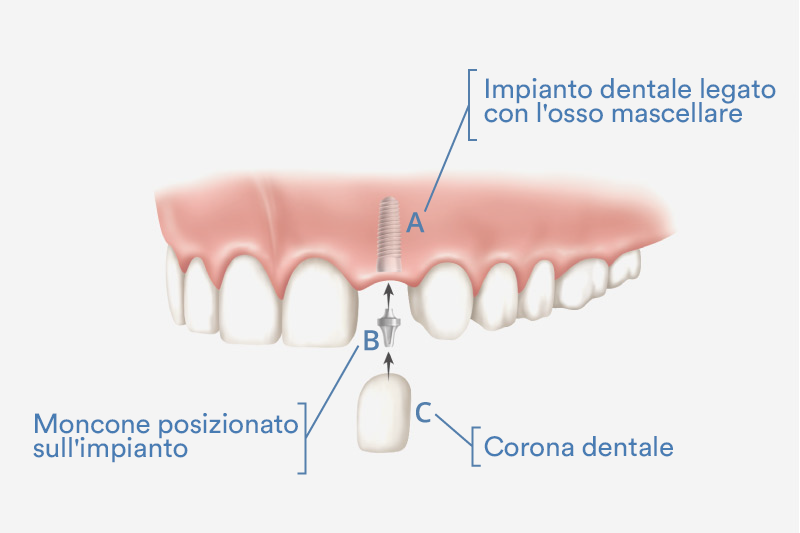
<style>
.page{position:relative;width:800px;height:533px;background:#f4f4f4}
.page>*{position:absolute;margin:0}
.t1{font:27.5px/11.9px "CircularStd-Book";letter-spacing:-0.01em;color:#487cb3}
.t2{font:27.5px "CircularStd-Book";letter-spacing:-0.01em;color:#487cb3}
</style>
<div class="page">
<p class="t1" style="left:484px;top:78px;width:292px;height:45px">Impianto dentale legato <br><br>con l'osso mascellare</p>
<p class="t1" style="left:33px;top:413px;width:265px;height:50px">Moncone posizionato <br><br>sull'impianto</p>
<p class="t2" style="left:484px;top:436px;width:189px;height:21px">Corona dentale</p>
</div>
